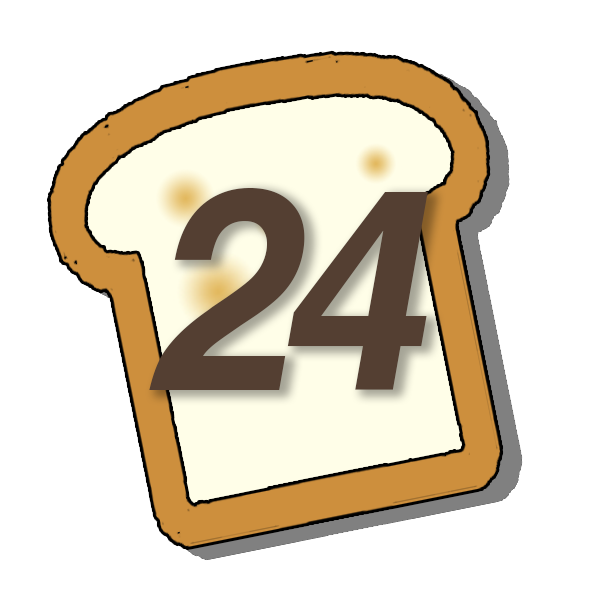
<style>
.page{position:relative;width:600px;height:600px;background:#ffffff}
.page>*{position:absolute;margin:0}
.t1{font:258.1px "H2gtrE";letter-spacing:-0.12em;color:#543f32;font-style:italic}
</style>
<div class="page">
<p class="t1" style="left:149px;top:188px;width:279px;height:202px">24</p>
</div>
